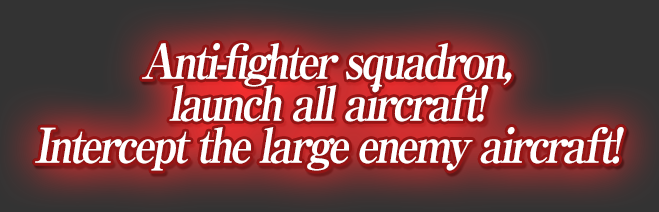
<style>
.page{position:relative;width:659px;height:212px}
.page>*{position:absolute;margin:0}
.t1{font:48px/42px "RyuminPro-ExBold";letter-spacing:-0.08em;color:#ffffff;font-style:italic;scale:0.9 1}
</style>
<div class="page">
<p class="t1" style="left:35px;top:43px;width:589px;height:128px;text-align:center">Anti-fighter squadron,<br>launch all aircraft!<br>Intercept the large enemy aircraft!</p>
</div>
